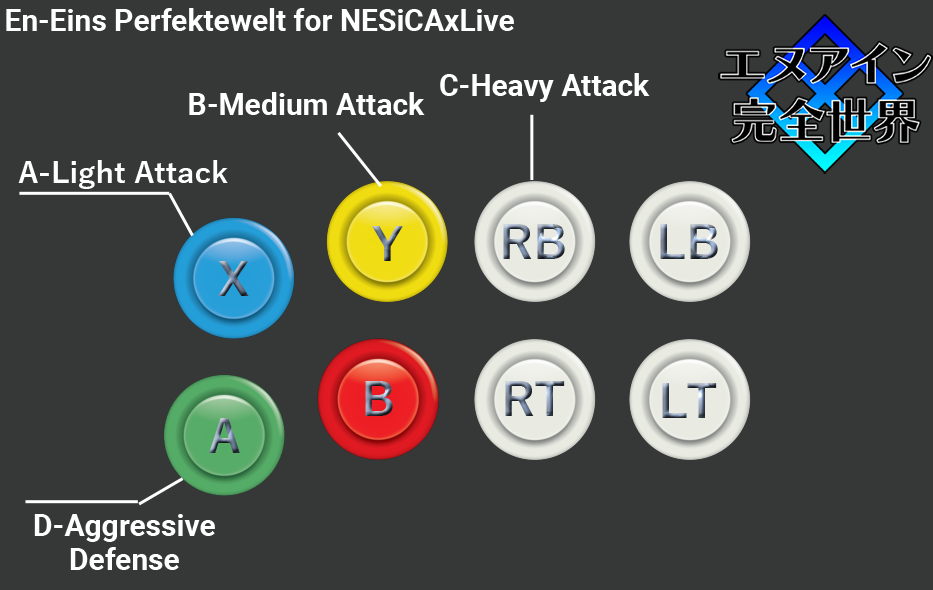
<style>
.page{position:relative;width:933px;height:590px;background:#363838}
.page>*{position:absolute;margin:0}
.t1{font:30px "Roboto-Bold";color:#ffffff}
.t2{font:30px "YuGothic-Bold";color:#ffffff}
.t3{font:30px/34px "Roboto-Bold";color:#ffffff}
</style>
<div class="page">
<p class="t1" style="left:6px;top:8px;width:508px;height:23px">En-Eins Perfektewelt for NESiCAxLive</p>
<p class="t1" style="left:440px;top:73px;width:210px;height:29px">C-Heavy Attack</p>
<p class="t1" style="left:189px;top:92px;width:236px;height:23px">B-Medium Attack</p>
<p class="t2" style="left:18px;top:160px;width:210px;height:29px">A-Light Attack</p>
<p class="t3" style="left:34px;top:514px;width:181px;height:56px;text-align:center">D-Aggressive<br>Defense</p>
</div>
